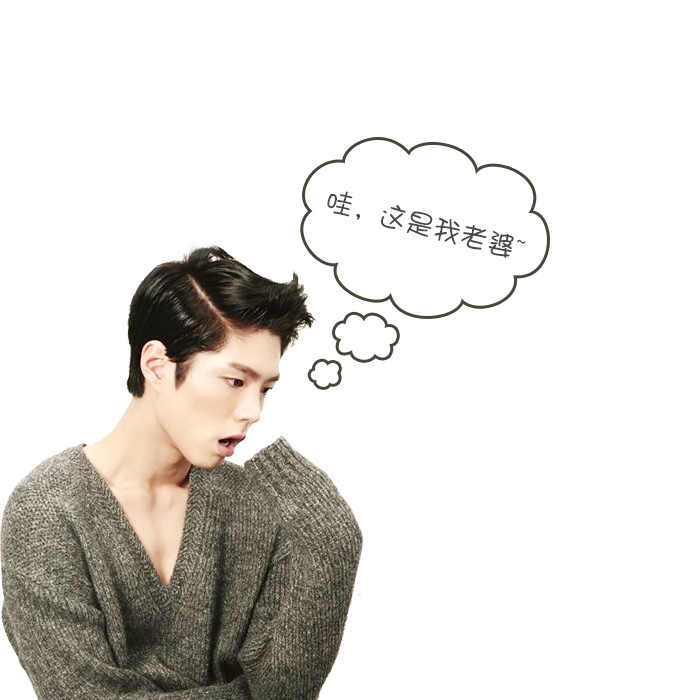
<style>
.page{position:relative;width:700px;height:700px;background:#ffffff}
.page>*{position:absolute;margin:0}
.t1{font:27.8px "DFPShaoNvW5";color:#474747}
</style>
<div class="page">
<p class="t1" style="left:327px;top:191px;width:199px;height:67px;rotate:14deg">哇，这是我老婆~</p>
</div>
